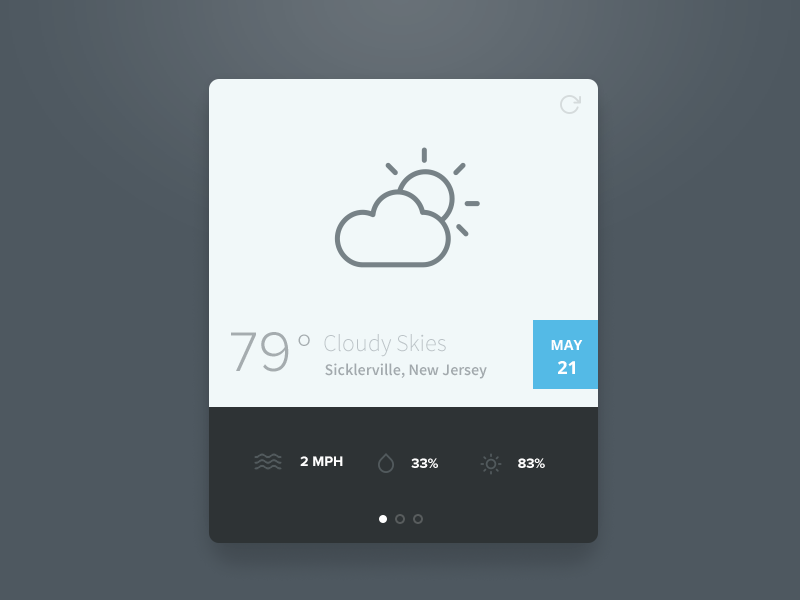
<style>
.page{position:relative;width:800px;height:600px;background:#4e5860}
.page>*{position:absolute;margin:0}
.t1{font:57.6px "ProximaNova-Light";color:#a5acaf;text-transform:uppercase}
.t2{font:16.8px "ProximaNova-Regular";color:#a5acaf;text-transform:uppercase}
.t3{font:24px "SourceSansPro-Light";color:#bac2c6}
.t4{font:14px "OpenSans-Bold";color:#ffffff}
.t5{font:16px "SourceSansPro-Semibold";color:#a2a9ad}
.t6{font:18px "OpenSans-Bold";color:#ffffff}
.t7{font:14px "ProximaNova-Bold";color:#ffffff;text-transform:uppercase}
</style>
<div class="page">
<p class="t1" style="left:231px;top:332px;width:58px;height:40px">79</p>
<p class="t2" style="left:298px;top:334px;width:12px;height:12px">o</p>
<p class="t3" style="left:324px;top:334px;width:122px;height:23px">Cloudy Skies</p>
<p class="t4" style="left:551px;top:340px;width:32px;height:10px">MAY</p>
<p class="t5" style="left:325px;top:363px;width:162px;height:16px">Sicklerville, New Jersey</p>
<p class="t6" style="left:558px;top:361px;width:17px;height:13px">21</p>
<p class="t7" style="left:300px;top:456px;width:43px;height:10px">2 MPH</p>
<p class="t7" style="left:411px;top:458px;width:27px;height:10px">33%</p>
<p class="t7" style="left:518px;top:458px;width:27px;height:10px">83%</p>
</div>
